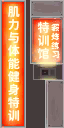
<style>
.page{position:relative;width:64px;height:128px}
.page>*{position:absolute;margin:0}
.t1{font:12px/13px "JiangChengYuanTi-600W";color:#ffffe6}
.t2{font:8px/9px "BoutiqueBitmap7x7_1.7";color:#ffffe6}
</style>
<div class="page">
<p class="t1" style="left:8px;top:6px;width:12px;height:115px">肌<br>力<br>与<br>体<br>能<br>健<br>身<br>特<br>训</p>
<p class="t1" style="left:38px;top:21px;width:11px;height:38px">特<br>训<br>馆</p>
<p class="t2" style="left:51px;top:23px;width:8px;height:36px">锻<br>炼<br>练<br>习</p>
</div>
